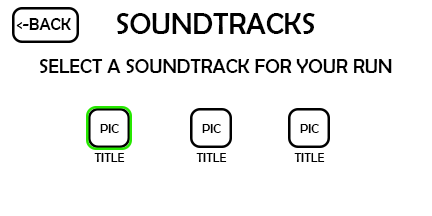
<style>
.page{position:relative;width:432px;height:216px;background:#ffffff}
.page>*{position:absolute;margin:0}
.t1{font:30px "BerlinSansFB-Reg";color:#000000}
.t2{font:17px "BerlinSansFB-Reg";color:#000000}
.t3{font:20px "BerlinSansFB-Reg";color:#000000}
.t4{font:13px "BerlinSansFB-Reg";color:#000000}
</style>
<div class="page">
<p class="t1" style="left:117px;top:13px;width:198px;height:21px">SOUNDTRACKS</p>
<p class="t2" style="left:16px;top:18px;width:55px;height:12px">&lt;-BACK</p>
<p class="t3" style="left:40px;top:59px;width:352px;height:14px">SELECT A SOUNDTRACK FOR YOUR RUN</p>
<p class="t4" style="left:100px;top:124px;width:19px;height:9px">PIC</p>
<p class="t4" style="left:202px;top:124px;width:19px;height:9px">PIC</p>
<p class="t4" style="left:300px;top:124px;width:19px;height:9px">PIC</p>
<p class="t4" style="left:94px;top:153px;width:31px;height:9px">TITLE</p>
<p class="t4" style="left:196px;top:153px;width:31px;height:9px">TITLE</p>
<p class="t4" style="left:294px;top:153px;width:31px;height:9px">TITLE</p>
</div>
